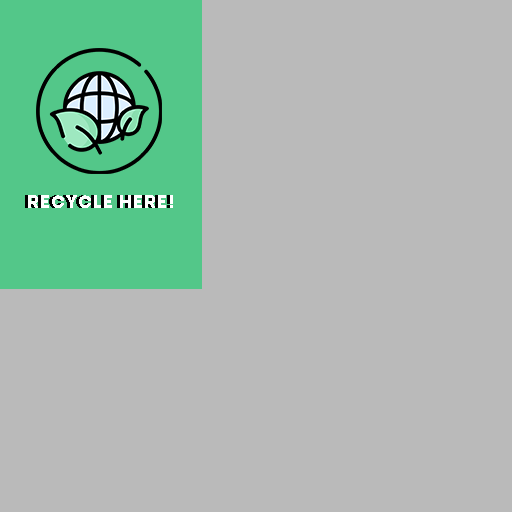
<style>
.page{position:relative;width:512px;height:512px;background:#bababa}
.page>*{position:absolute;margin:0}
.t1{font:18px "Mont-HeavyDEMO";letter-spacing:0.05em;color:#000000}
.t2{font:18px "Mont-HeavyDEMO";letter-spacing:0.05em;color:#ffffff}
</style>
<div class="page">
<p class="t1" style="left:25px;top:195px;width:145px;height:13px">RECYCLE HERE!</p>
<p class="t2" style="left:28px;top:195px;width:145px;height:13px">RECYCLE HERE!</p>
</div>
